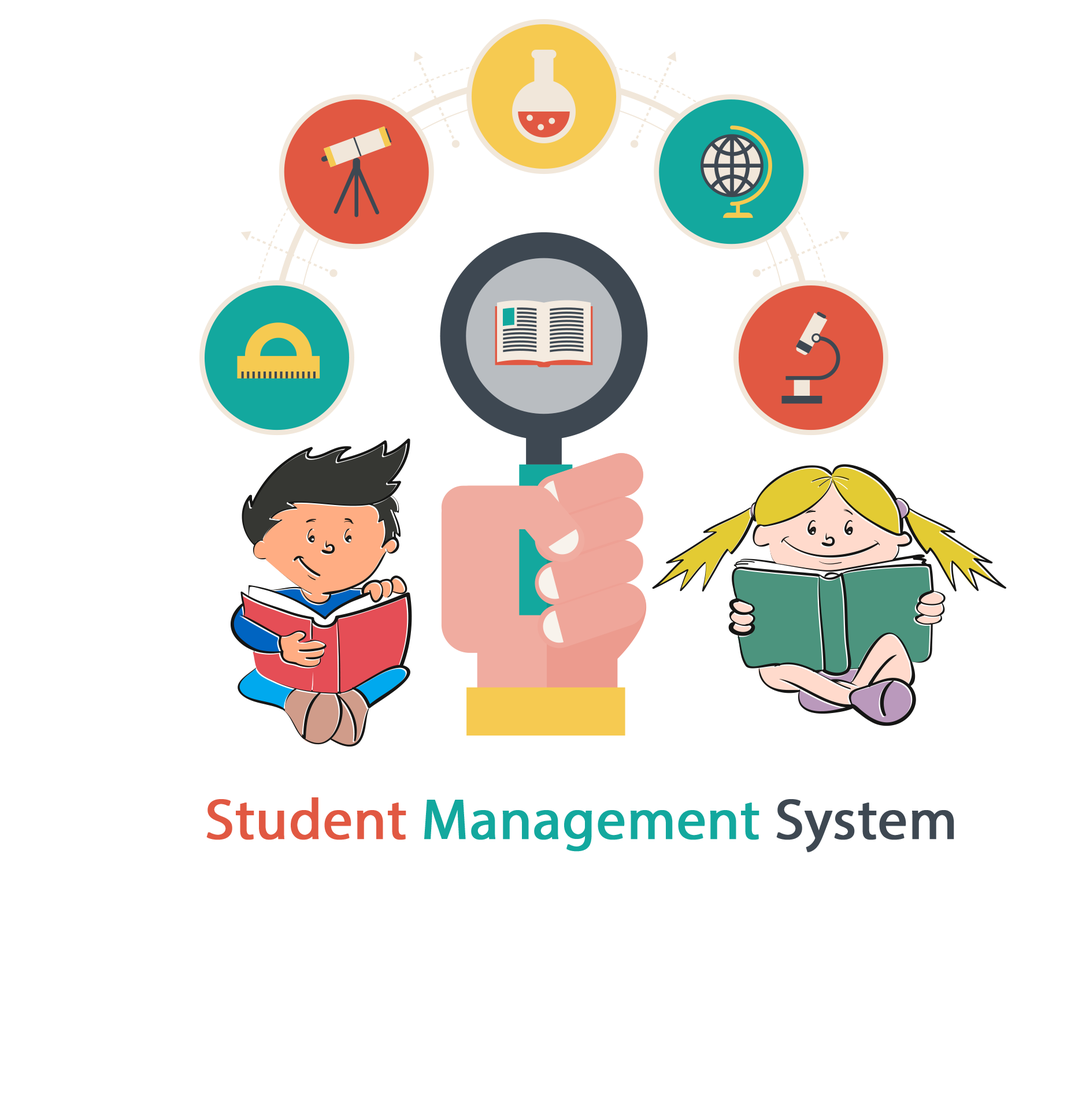
<style>
.page{position:relative;width:1071px;height:1114px;background:#ffffff}
.page>*{position:absolute;margin:0}
.t1{font:57.8px "MyriadPro-Regular";color:#13a89e;font-weight:bold}
.t2{font:57.8px "MyriadPro-Regular";color:#e15842;font-weight:bold}
.t3{font:57.8px "MyriadPro-Regular";color:#3e4852;font-weight:bold}
</style>
<div class="page">
<p class="t1" style="left:206px;top:797px;width:748px;height:55px"><span class="t2">Student </span>Management <span class="t3">System</span></p>
</div>
